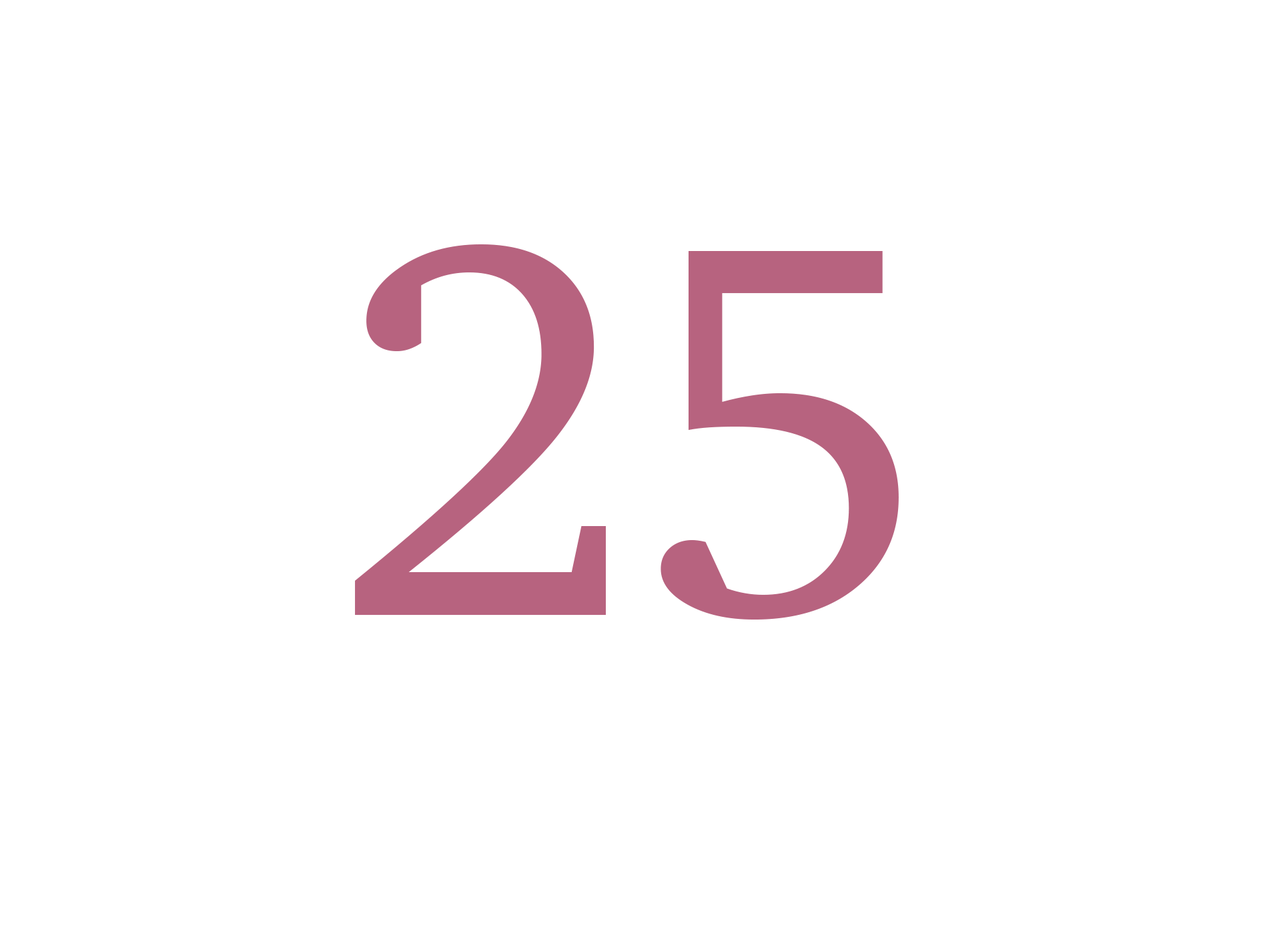
<style>
.page{position:relative;width:1261px;height:946px;background:#ffffff}
.page>*{position:absolute;margin:0}
.t1{font:541.5px "Charter-Roman";color:#b7637f}
</style>
<div class="page">
<p class="t1" style="left:355px;top:244px;width:544px;height:375px">25</p>
</div>
